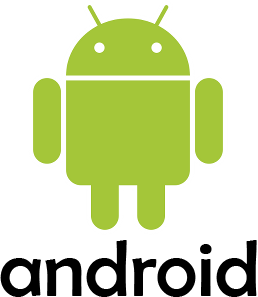
<style>
.page{position:relative;width:258px;height:297px;background:#ffffff}
.page>*{position:absolute;margin:0}
.t1{font:80px "BerlinSansFB-Reg";color:#000000}
</style>
<div class="page">
<p class="t1" style="left:0px;top:240px;width:257px;height:57px">android</p>
</div>
